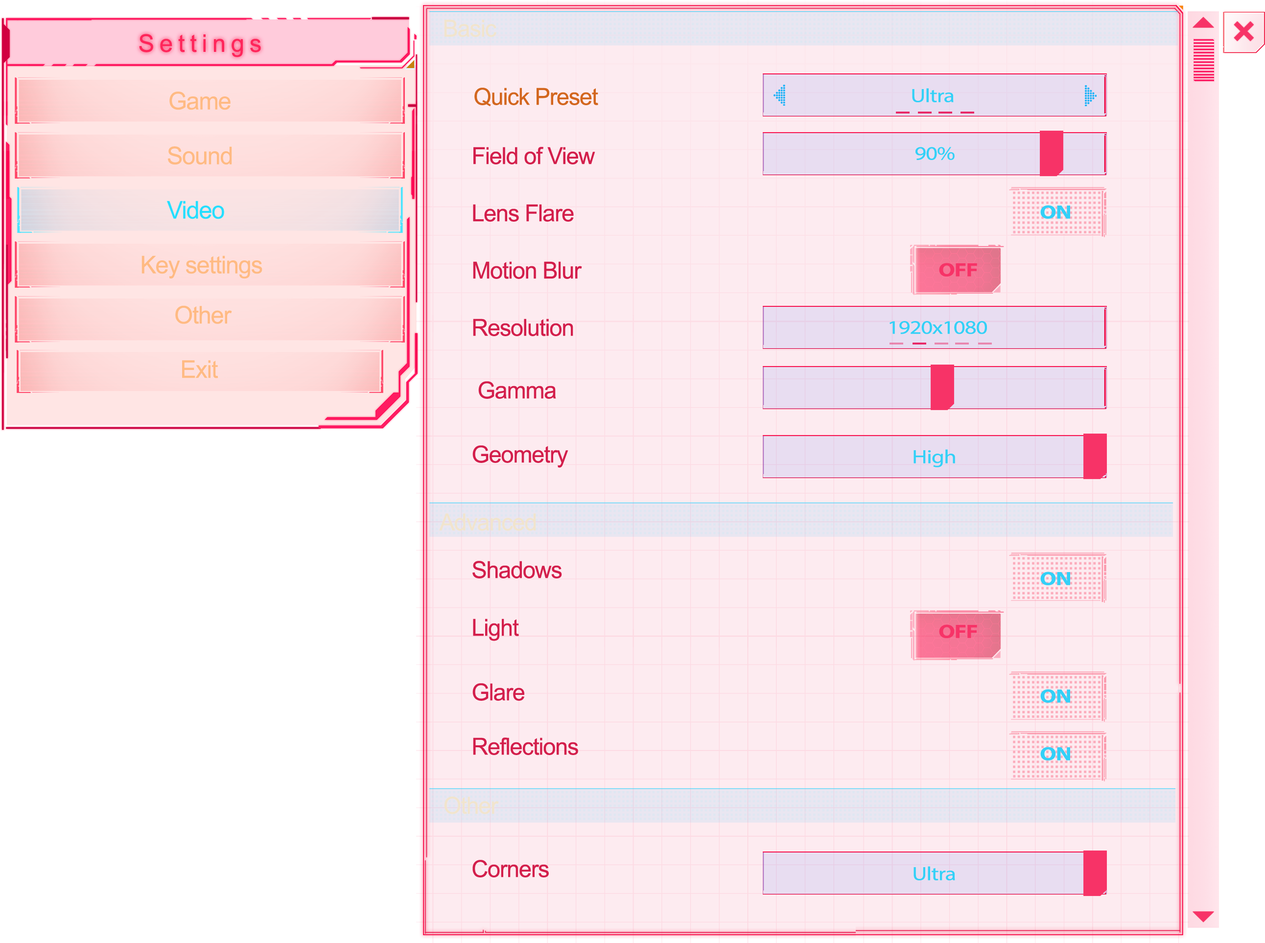
<style>
.page{position:relative;width:1265px;height:943px;background:#fdebf0}
.page>*{position:absolute;margin:0}
.t1{font:23.5px "ArialNarrow";letter-spacing:-0.025em;color:#f1e4cd;scale:1.2 1}
.t2{font:24.4px "ArialNarrow";letter-spacing:-0.025em;color:#ff255a;scale:1.2 1}
.t3{font:23.5px "ArialNarrow";letter-spacing:-0.025em;color:#d3661e;scale:1.2 1}
.t4{font:19.2px "MyriadPro-Regular";letter-spacing:-0.025em;color:#33d0f7;scale:1.2 1}
.t5{font:24.4px "ArialNarrow";letter-spacing:-0.025em;color:#ffba83;scale:1.2 1}
.t6{font:23.5px "ArialNarrow";letter-spacing:-0.025em;color:#d31e4b;scale:1.2 1}
.t7{font:24.4px "ArialNarrow";letter-spacing:-0.025em;color:#25deff;scale:1.2 1}
.t8{font:19.2px "MyriadPro-Bold";letter-spacing:-0.025em;color:#33d0f7;scale:1.2 1}
.t9{font:19.2px "MyriadPro-Bold";letter-spacing:-0.025em;color:#f73367;scale:1.2 1}
</style>
<div class="page">
<p class="t1" style="left:444px;top:20px;width:52px;height:17px">Basic</p>
<p class="t2" style="left:139px;top:34px;width:122px;height:23px">S e t t i n g s</p>
<p class="t3" style="left:474px;top:88px;width:124px;height:18px">Quick Preset</p>
<p class="t4" style="left:912px;top:88px;width:41px;height:14px">Ultra</p>
<p class="t5" style="left:169px;top:92px;width:61px;height:18px">Game</p>
<p class="t5" style="left:168px;top:146px;width:64px;height:19px">Sound</p>
<p class="t6" style="left:473px;top:147px;width:122px;height:17px">Field of View</p>
<p class="t4" style="left:915px;top:147px;width:39px;height:13px">90%</p>
<p class="t7" style="left:167px;top:201px;width:57px;height:18px">Video</p>
<p class="t6" style="left:473px;top:204px;width:101px;height:18px">Lens Flare</p>
<p class="t8" style="left:1040px;top:205px;width:30px;height:14px">ON</p>
<p class="t5" style="left:141px;top:255px;width:121px;height:24px">Key settings</p>
<p class="t6" style="left:473px;top:261px;width:109px;height:18px">Motion Blur</p>
<p class="t9" style="left:939px;top:263px;width:38px;height:13px">OFF</p>
<p class="t5" style="left:175px;top:305px;width:57px;height:19px">Other</p>
<p class="t6" style="left:473px;top:319px;width:100px;height:17px">Resolution</p>
<p class="t4" style="left:889px;top:321px;width:98px;height:13px">1920x1080</p>
<p class="t5" style="left:182px;top:360px;width:36px;height:18px">Exit</p>
<p class="t6" style="left:478px;top:381px;width:78px;height:18px">Gamma</p>
<p class="t6" style="left:472px;top:445px;width:96px;height:23px">Geometry</p>
<p class="t4" style="left:913px;top:449px;width:42px;height:18px">High</p>
<p class="t1" style="left:439px;top:513px;width:97px;height:18px">Advanced</p>
<p class="t6" style="left:472px;top:561px;width:90px;height:17px">Shadows</p>
<p class="t8" style="left:1040px;top:572px;width:30px;height:13px">ON</p>
<p class="t6" style="left:473px;top:619px;width:46px;height:22px">Light</p>
<p class="t9" style="left:939px;top:624px;width:38px;height:14px">OFF</p>
<p class="t6" style="left:472px;top:683px;width:52px;height:18px">Glare</p>
<p class="t8" style="left:1040px;top:689px;width:30px;height:14px">ON</p>
<p class="t6" style="left:473px;top:737px;width:105px;height:18px">Reflections</p>
<p class="t8" style="left:1040px;top:747px;width:30px;height:13px">ON</p>
<p class="t1" style="left:444px;top:796px;width:55px;height:18px">Other</p>
<p class="t6" style="left:472px;top:860px;width:77px;height:17px">Corners</p>
<p class="t4" style="left:913px;top:866px;width:42px;height:14px">Ultra</p>
</div>
